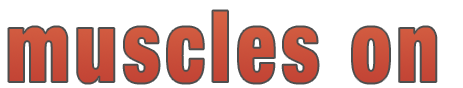
<style>
.page{position:relative;width:463px;height:88px;background:#ffffff}
.page>*{position:absolute;margin:0}
.t1{font:100px "HelveticaNeueLTCom-XBlkCn";letter-spacing:0.075em;color:#c84f3c;scale:0.8 1}
</style>
<div class="page">
<p class="t1" style="left:8px;top:10px;width:429px;height:74px">muscles on</p>
</div>
